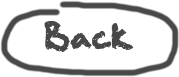
<style>
.page{position:relative;width:179px;height:77px;background:#ffffff}
.page>*{position:absolute;margin:0}
.t1{font:30px "squeakychalksound";color:#494848}
</style>
<div class="page">
<p class="t1" style="left:44px;top:21px;width:90px;height:31px">Back</p>
</div>
